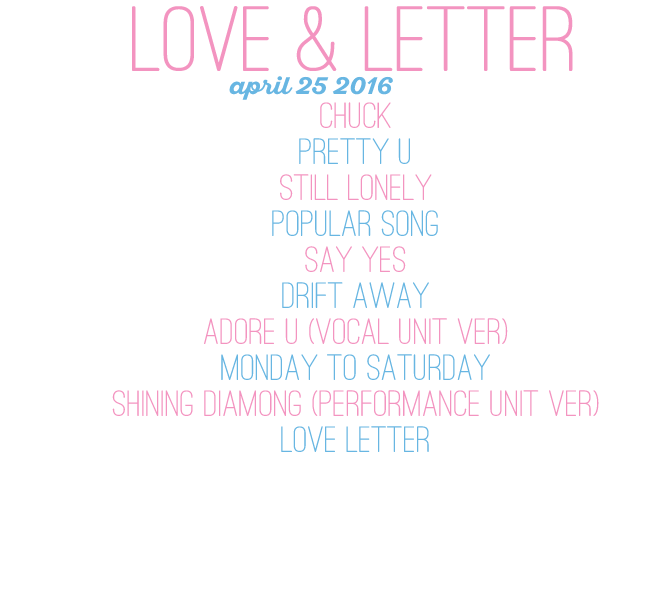
<style>
.page{position:relative;width:651px;height:606px;background:#ffffff}
.page>*{position:absolute;margin:0}
.t1{font:96px "OstrichSansRounded-Medium";color:#f394c0;scale:1.1 1}
.t2{font:24px "SantEliaScript-BoldDMO";color:#68b6e2;scale:1.1 1}
.t3{font:38px/36px "OstrichSansRounded-Medium";color:#f394c0;scale:1.1 1}
.t4{font:38px/36px "OstrichSansRounded-Medium";color:#68b6e2;scale:1.1 1}
</style>
<div class="page">
<p class="t1" style="left:132px;top:6px;width:441px;height:65px">love &amp; letter</p>
<p class="t2" style="left:229px;top:76px;width:164px;height:24px">april 25 2016</p>
<p class="t3" style="left:112px;top:102px;width:487px;height:350px;text-align:center">chuck<br><span class="t4">pretty u<br></span>still lonely<br><span class="t4">popular song<br></span>say yes<br><span class="t4">drift away<br></span>adore u (vocal unit ver)<br><span class="t4">monday to saturday<br></span>shining diamong (performance unit ver)<br><span class="t4">love letter</span></p>
</div>
